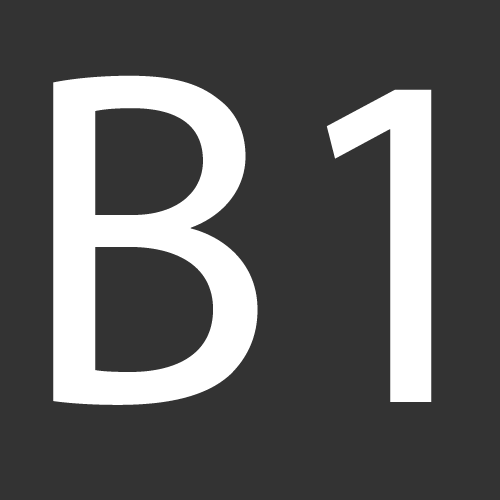
<style>
.page{position:relative;width:500px;height:500px;background:#333333}
.page>*{position:absolute;margin:0}
.t1{font:480.2px "MyriadPro-Regular";color:#ffffff}
</style>
<div class="page">
<p class="t1" style="left:53px;top:75px;width:379px;height:330px">B1</p>
</div>
